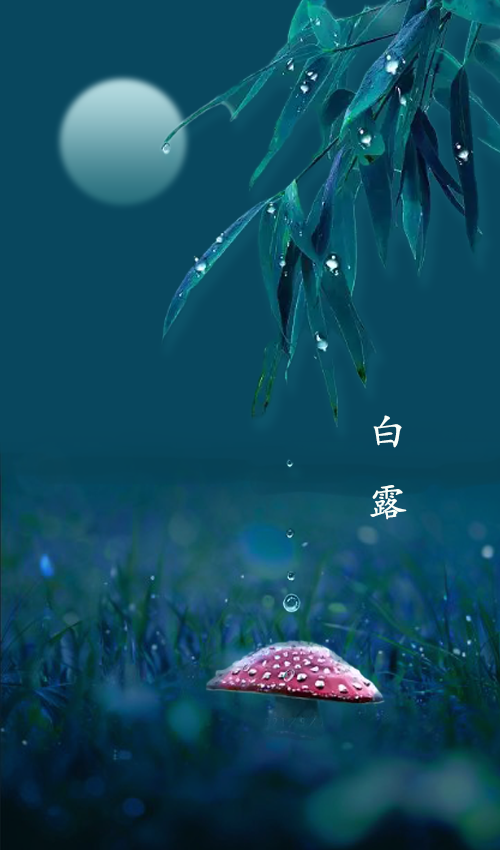
<style>
.page{position:relative;width:500px;height:850px;background:#08475e}
.page>*{position:absolute;margin:0}
.t1{font:40px "STKaiti";color:#f7fef9;font-weight:bold}
</style>
<div class="page">
<p class="t1" style="left:370px;top:415px;width:37px;height:105px">白露</p>
</div>
